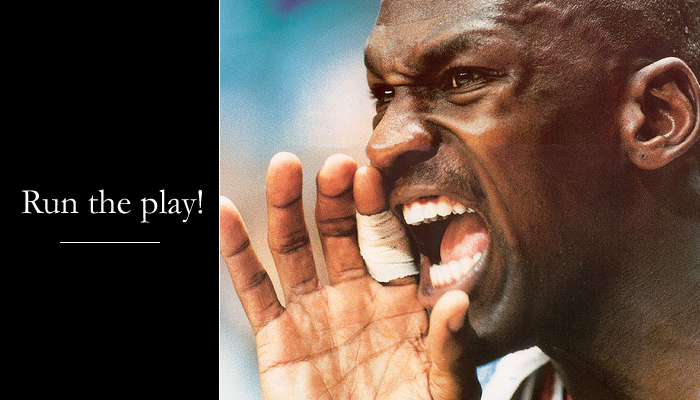
<style>
.page{position:relative;width:700px;height:400px;background:#000000}
.page>*{position:absolute;margin:0}
.t1{font:36px "Garamond";color:#ffffff}
</style>
<div class="page">
<p class="t1" style="left:21px;top:189px;width:181px;height:34px">Run the play!</p>
</div>
